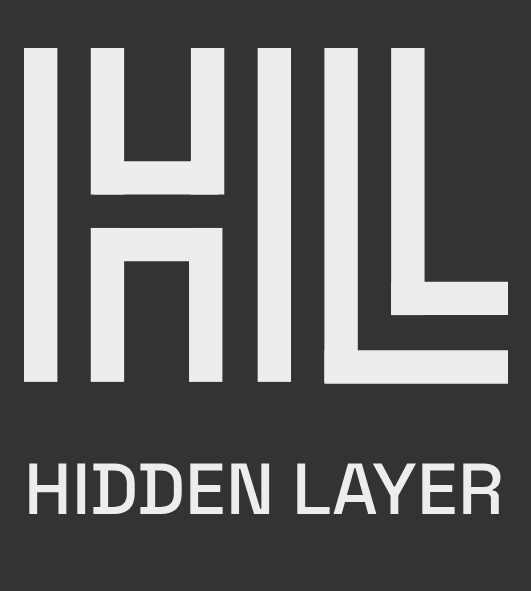
<style>
.page{position:relative;width:531px;height:591px;background:#333333}
.page>*{position:absolute;margin:0}
.t1{font:72.2px "SpaceGroteskLight-Medium";color:#ededed}
</style>
<div class="page">
<p class="t1" style="left:29px;top:463px;width:472px;height:51px">HIDDEN LAYER</p>
</div>
